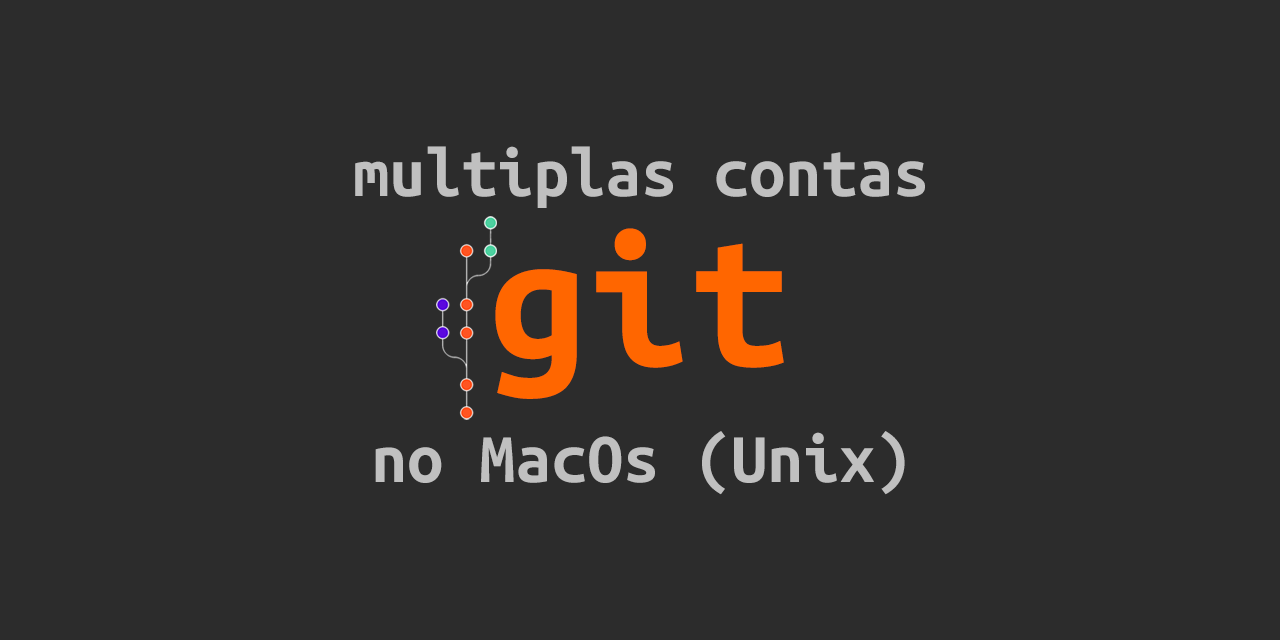
<style>
.page{position:relative;width:1280px;height:640px;background:#2c2c2c}
.page>*{position:absolute;margin:0}
.t1{font:72px "UbuntuMonoDerivativePowerline-Bold";color:#c0c0c0}
.t2{font:200px "UbuntuMonoDerivativePowerline-Bold";color:#ff6600}
</style>
<div class="page">
<p class="t1" style="left:355px;top:146px;width:570px;height:62px">multiplas contas</p>
<p class="t2" style="left:495px;top:228px;width:289px;height:171px">git</p>
<p class="t1" style="left:375px;top:431px;width:530px;height:64px">no MacOs (Unix)</p>
</div>
